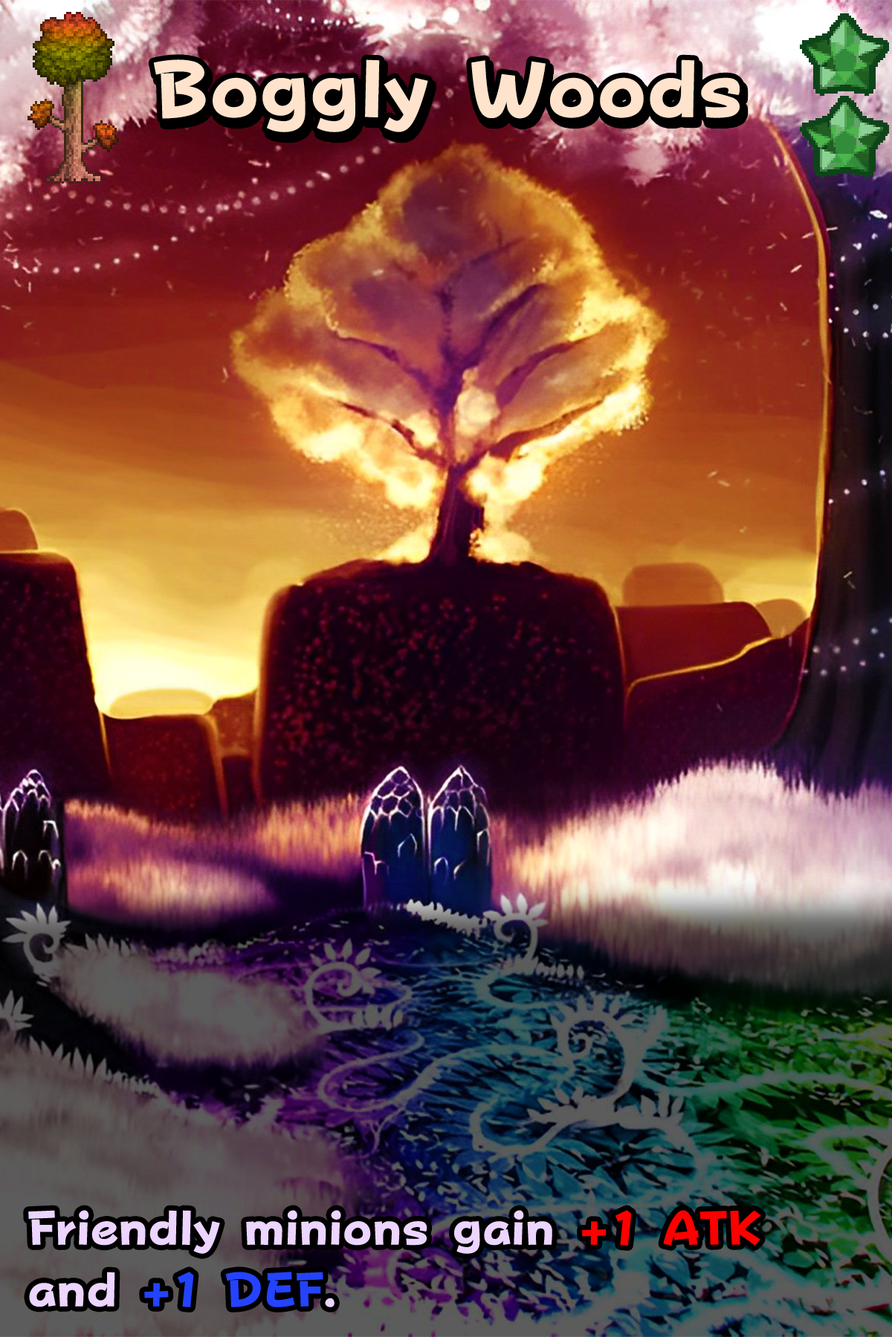
<style>
.page{position:relative;width:892px;height:1337px}
.page>*{position:absolute;margin:0}
.t1{font:136.7px "FOTPopHappinessStrp-ExtraBold";color:#ffe3cc}
.t2{font:81.7px "FOTPopHappinessStrp-ExtraBold";color:#ecd5ff}
.t3{font:81.7px "FOTPopHappinessStrp-ExtraBold";color:#ff0000}
.t4{font:81.7px "FOTPopHappinessStrp-ExtraBold";color:#2443ff}
</style>
<div class="page">
<p class="t1" style="left:153px;top:59px;width:586px;height:73px">Boggly Woods</p>
<p class="t2" style="left:28px;top:1210px;width:733px;height:98px">Friendly minions gain <span class="t3">+1 ATK </span>and <span class="t4">+1 DEF</span>.</p>
</div>
